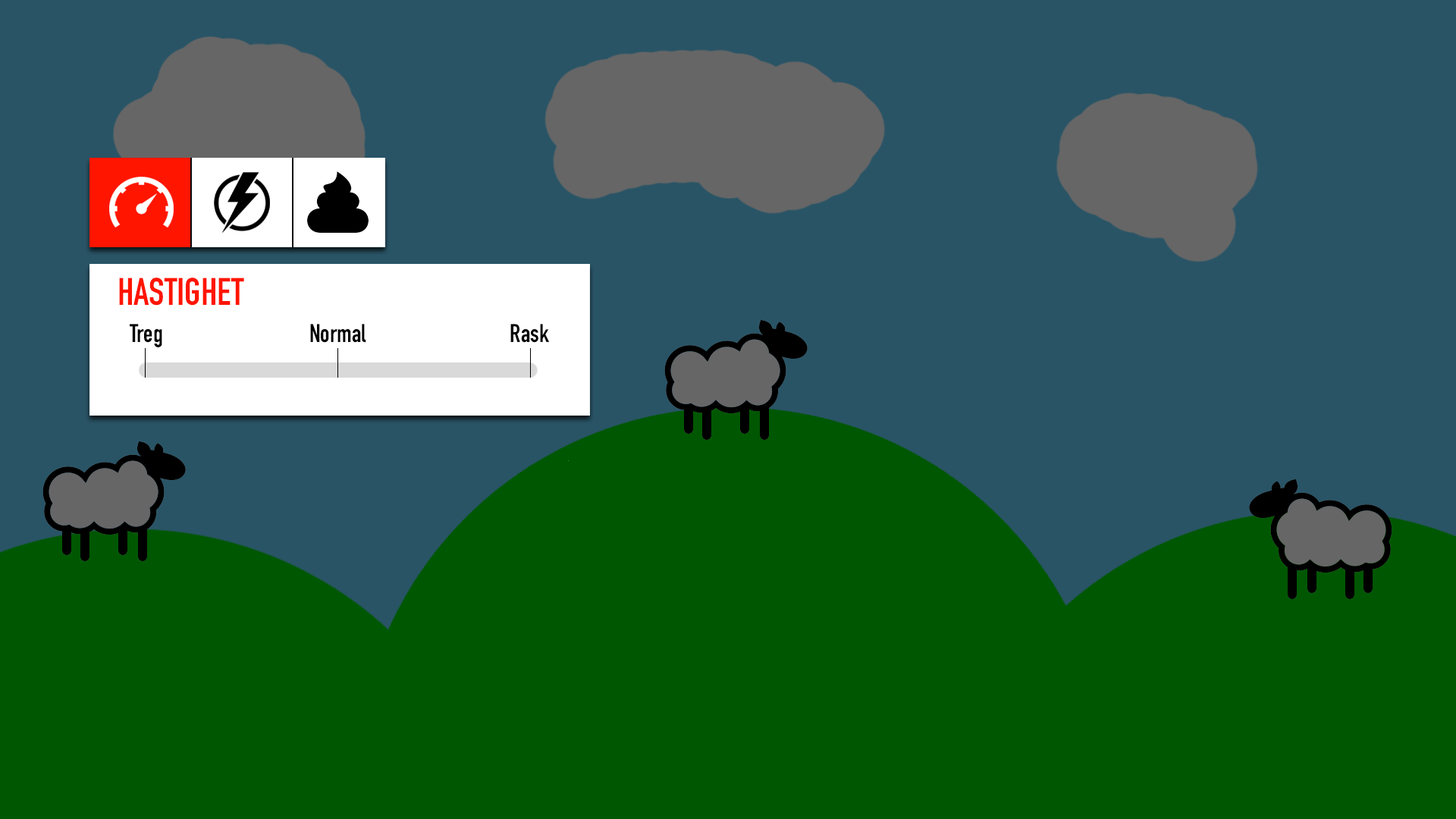
<style>
.page{position:relative;width:1456px;height:819px;background:#295466}
.page>*{position:absolute;margin:0}
.t1{font:37.9px "DINCondensed-Bold";color:#ff1500}
.t2{font:25.3px "DINCondensed-Bold";color:#000000}
</style>
<div class="page">
<p class="t1" style="left:119px;top:278px;width:125px;height:28px">HASTIGHET</p>
<p class="t2" style="left:130px;top:324px;width:32px;height:23px">Treg</p>
<p class="t2" style="left:310px;top:324px;width:56px;height:19px">Normal</p>
<p class="t2" style="left:510px;top:324px;width:39px;height:19px">Rask</p>
</div>
